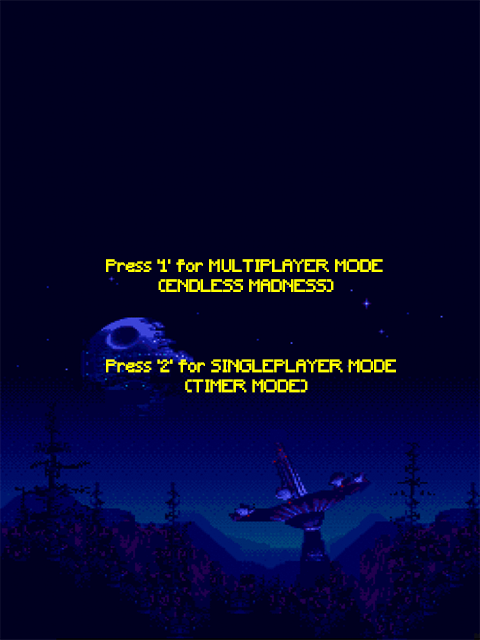
<style>
.page{position:relative;width:480px;height:640px;background:#000020}
.page>*{position:absolute;margin:0}
.t1{font:16.7px "Minecraft";letter-spacing:0.005em;color:#ffff00}
</style>
<div class="page">
<p class="t1" style="left:106px;top:259px;width:290px;height:134px">Press '1' for MULTIPLAYER MODE<br>          (ENDLESS MADNESS)<br><br><br><br>Press '2' for SINGLEPLAYER MODE<br>               (TIMER MODE)</p>
</div>
